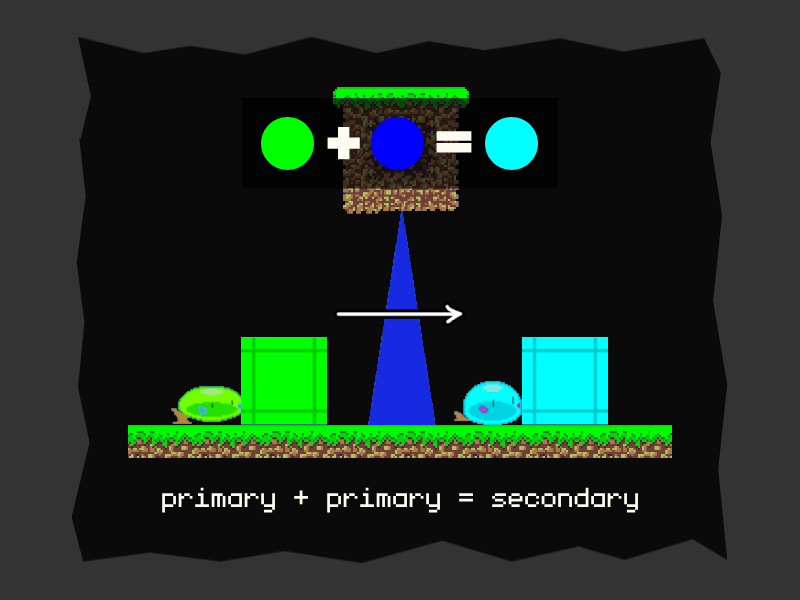
<style>
.page{position:relative;width:800px;height:600px;background:#0a0a0a}
.page>*{position:absolute;margin:0}
.t1{font:44px "monogram";color:#fefcef}
</style>
<div class="page">
<p class="t1" style="left:162px;top:487px;width:476px;height:26px">primary + primary = secondary</p>
</div>
